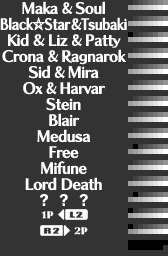
<style>
.page{position:relative;width:168px;height:256px;background:#333333}
.page>*{position:absolute;margin:0}
.t1{font:15px/16px "ChiaroStd-B";letter-spacing:-0.05em;color:#ffffff;font-weight:bold}
.t2{font:15px/16px "ChiaroStd-B";letter-spacing:-0.05em;color:#ffffff;scale:0.9 1}
.t3{font:15px/16px "ChiaroStd-B";letter-spacing:-0.05em;color:#ffffff;font-weight:bold;scale:0.9 1}
.t4{font:15px/16px "ChiaroStd-B";letter-spacing:-0.05em;color:#ffffff;font-weight:bold;scale:0.92 1}
.t5{font:15px/16px "ChiaroStd-B";letter-spacing:-0.2em;color:#ffffff;font-weight:bold;scale:0.9 1}
.t6{font:18px/16px "SegoeUISymbol";letter-spacing:-0.15em;color:#ffffff;font-weight:bold;scale:0.9 1}
.t7{font:15px/16px "ChiaroStd-B";letter-spacing:-0.025em;color:#ffffff;font-weight:bold;scale:0.8 1}
.t8{font:15px/16px "ChiaroStd-B";letter-spacing:-0.15em;color:#ffffff;scale:0.9 1}
.t9{font:15px/16px "ChiaroStd-B";letter-spacing:-0.1em;color:#ffffff;font-weight:bold;scale:0.9 1}
.t10{font:15px/16px "ChiaroStd-B";letter-spacing:-0.025em;color:#ffffff;font-weight:bold;scale:0.9 1}
.t11{font:15px/16px "ChiaroStd-B";letter-spacing:-0.05em;color:#ffffff}
.t12{font:13.5px/16px "ChiaroStd-B";letter-spacing:-0.05em;color:#ffffff;font-weight:bold;scale:1.11 1}
</style>
<div class="page">
<p class="t1" style="left:0px;top:1px;width:127px;height:190px;text-align:center">Maka <span class="t2">&amp; </span>Soul<br><span class="t3">Bl</span><span class="t4">ac</span><span class="t5">k</span><span class="t6">⛤</span><span class="t7">S</span><span class="t3">tar </span><span class="t8">&amp; </span><span class="t9">T</span><span class="t3">suba</span><span class="t10">ki<br></span>Kid <span class="t11">&amp; </span>Liz <span class="t2">&amp; </span>Patt<span class="t12">y<br></span>Crona <span class="t2">&amp; </span>Ra<span class="t12">g</span>narok<br>Sid <span class="t2">&amp; </span>Mira<br>Ox <span class="t2">&amp; </span>Harvar<br>Stein<br>Blair<br>Medusa<br>Free<br>Mifune<br>Lord Death</p>
</div>
